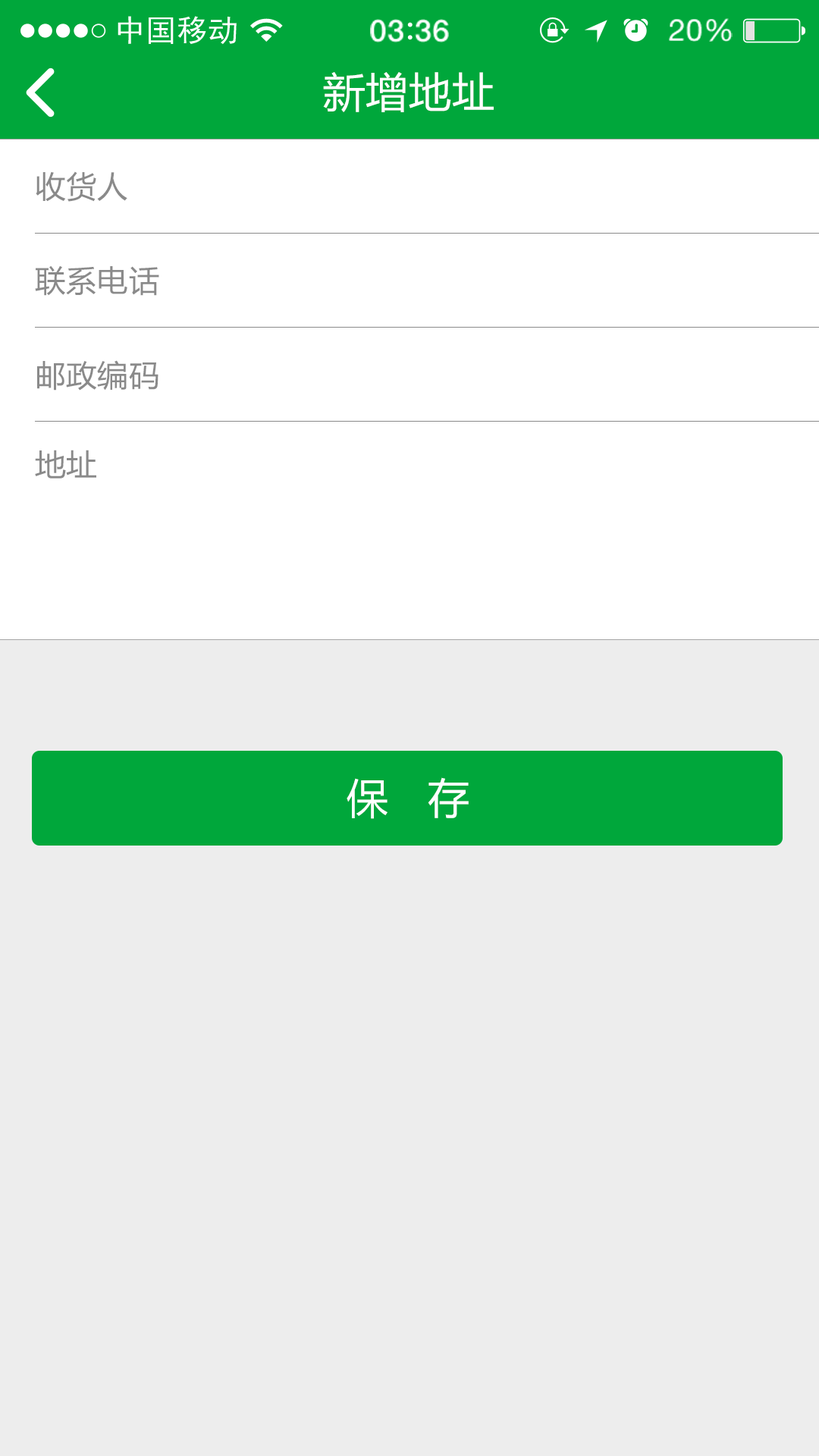
<style>
.page{position:relative;width:819px;height:1456px;background:#ededed}
.page>*{position:absolute;margin:0}
.t1{font:41.7px "MicrosoftYaHei";letter-spacing:0.02em;color:#ffffff}
.t2{font:30.3px "MicrosoftYaHei";letter-spacing:0.02em;color:#8a8a8a}
</style>
<div class="page">
<p class="t1" style="left:323px;top:72px;width:171px;height:40px">新增地址</p>
<p class="t2" style="left:36px;top:171px;width:91px;height:31px">收货人</p>
<p class="t2" style="left:35px;top:265px;width:124px;height:31px">联系电话</p>
<p class="t2" style="left:37px;top:360px;width:121px;height:31px">邮政编码</p>
<p class="t2" style="left:35px;top:450px;width:61px;height:29px">地址</p>
<p class="t1" style="left:347px;top:777px;width:122px;height:42px">保   存</p>
</div>
